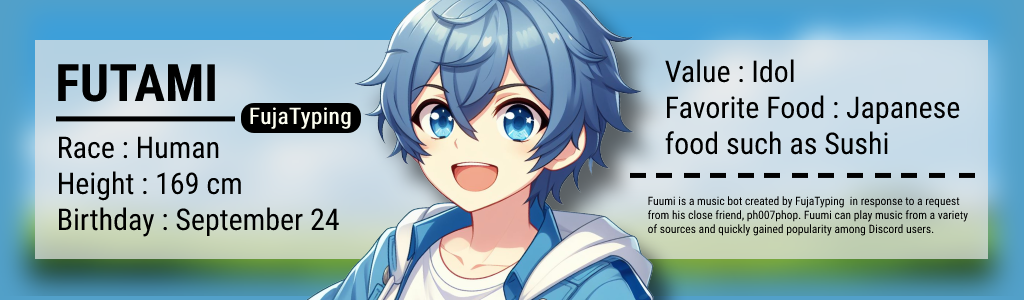
<style>
.page{position:relative;width:1024px;height:300px}
.page>*{position:absolute;margin:0}
.t1{font:51.5px "RobotoCondensed-Bold";color:#000000}
.t2{font:30px "RobotoCondensed-Regular";color:#000000}
.t3{font:22.8px "RobotoCondensed-Regular";color:#fcfdef;font-weight:bold}
.t4{font:11.6px "RobotoCondensed-Regular";color:#000000}
</style>
<div class="page">
<p class="t1" style="left:58px;top:64px;width:157px;height:38px">FUTAMI</p>
<p class="t2" style="left:665px;top:59px;width:295px;height:96px">Value : Idol<br>Favorite Food : Japanese <br>food such as Sushi</p>
<p class="t3" style="left:250px;top:107px;width:101px;height:22px">FujaTyping</p>
<p class="t2" style="left:58px;top:136px;width:281px;height:101px">Race : Human<br>Height : 169 cm<br>Birthday : September 24</p>
<p class="t4" style="left:648px;top:196px;width:320px;height:40px">Fuumi is a music bot created by FujaTyping  in response to a request <br>from his close friend, ph007phop. Fuumi can play music from a variety <br>of sources and quickly gained popularity among Discord users.</p>
</div>
